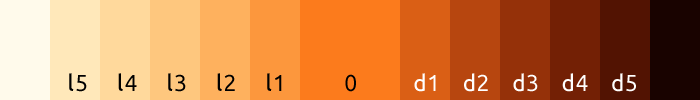
<style>
.page{position:relative;width:700px;height:100px}
.page>*{position:absolute;margin:0}
.t1{font:23px "Ubuntu";letter-spacing:0.065em;color:#000000}
.t2{font:23px "Ubuntu";letter-spacing:0.012em;color:#ffffff}
</style>
<div class="page">
<p class="t1" style="left:69px;top:73px;width:213px;height:19px">l5    l4    l3    l2    l1</p>
<p class="t1" style="left:345px;top:74px;width:11px;height:18px">0</p>
<p class="t2" style="left:414px;top:73px;width:222px;height:19px">d1    d2    d3    d4    d5</p>
</div>
